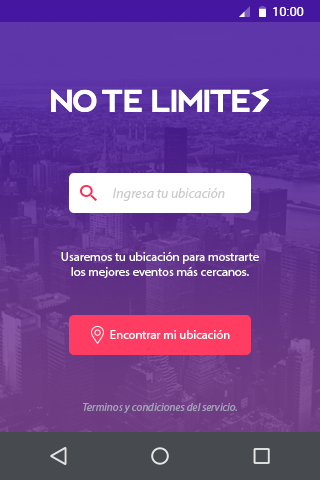
<style>
.page{position:relative;width:320px;height:480px}
.page>*{position:absolute;margin:0}
.t1{font:12.5px "Roboto-Regular";color:#ffffff}
.t2{font:13.9px "MyriadPro-It";color:#c9c9c9}
.t3{font:12.5px "MyriadPro-Regular";color:#ffffff}
.t4{font:11.1px "MyriadPro-It";color:#a2a1b8}
</style>
<div class="page">
<p class="t1" style="left:273px;top:7px;width:31px;height:9px">10:00</p>
<p class="t2" style="left:113px;top:188px;width:112px;height:13px">Ingresa tu ubicación</p>
<p class="t3" style="left:61px;top:252px;width:198px;height:26px;text-align:center">Usaremos tu ubicación para mostrarte<br>los mejores eventos más cercanos.</p>
<p class="t3" style="left:110px;top:330px;width:120px;height:9px">Encontrar mi ubicación</p>
<p class="t4" style="left:83px;top:403px;width:154px;height:10px">Terminos y condiciones del servicio.</p>
</div>
